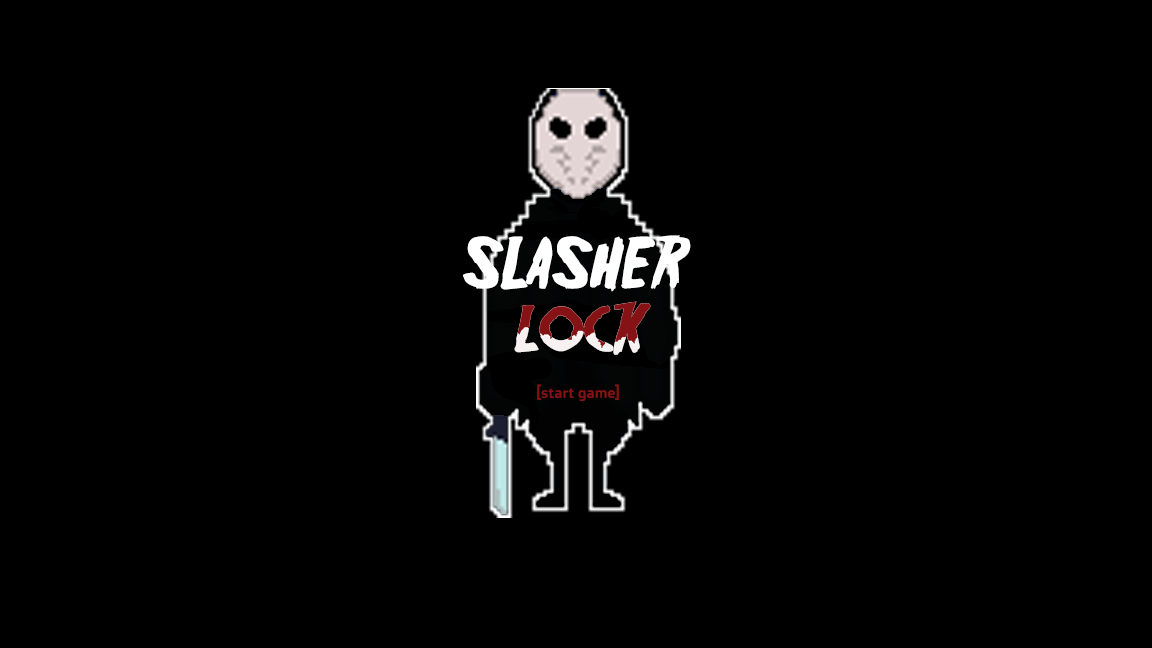
<style>
.page{position:relative;width:1152px;height:648px;background:#000000}
.page>*{position:absolute;margin:0}
.t1{font:64.6px "Friday13";color:#ffffff}
.t2{font:64.6px "Friday13"}
.t3{font:13.7px "DoppioOne-Regular";color:#851315;scale:1.04 1}
</style>
<div class="page">
<p class="t1" style="left:463px;top:235px;width:228px;height:57px">SLASHER</p>
<p class="t2" style="left:514px;top:301px;width:137px;height:54px">lock</p>
<p class="t3" style="left:537px;top:384px;width:82px;height:17px">[start game]</p>
</div>
